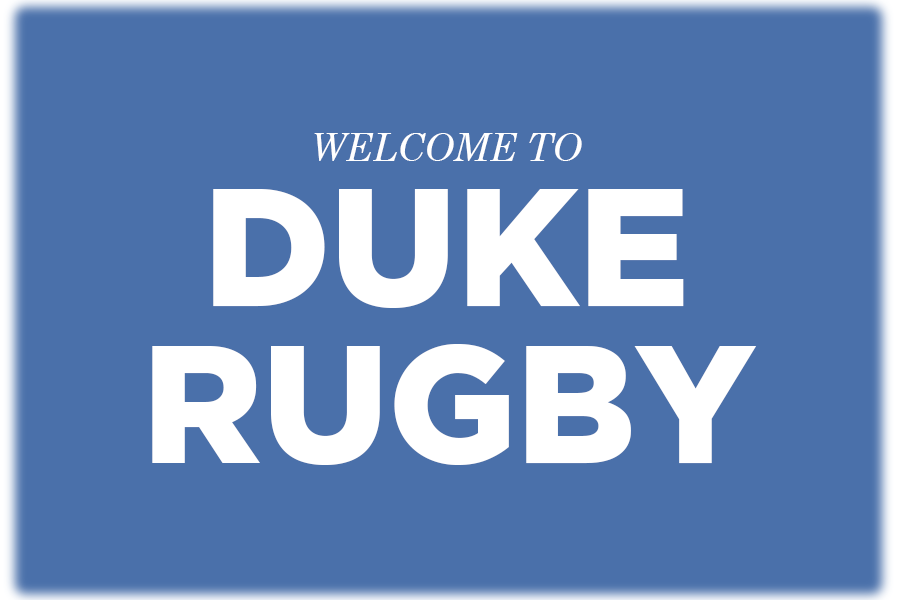
<style>
.page{position:relative;width:900px;height:600px;background:#4a70aa}
.page>*{position:absolute;margin:0}
.t1{font:37.5px "CenturySchoolbook-Italic";color:#ffffff}
.t2{font:166.7px "Gotham-Black";color:#ffffff}
</style>
<div class="page">
<p class="t1" style="left:314px;top:133px;width:268px;height:28px">WELCOME TO</p>
<p class="t2" style="left:213px;top:189px;width:471px;height:119px">DUKE</p>
<p class="t2" style="left:152px;top:344px;width:605px;height:121px">RUGBY</p>
</div>
